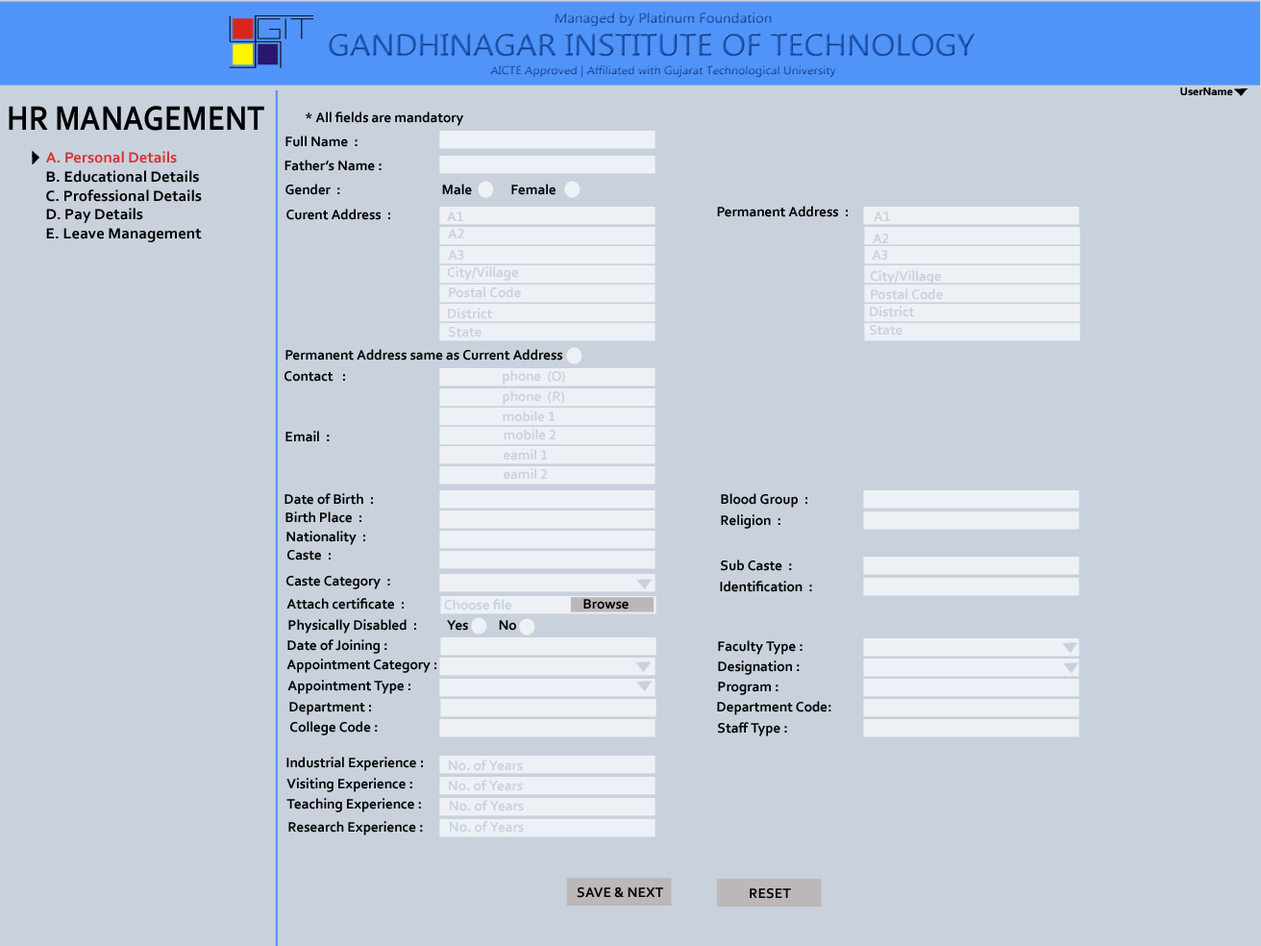
<style>
.page{position:relative;width:1261px;height:946px;background:#c9d1dd}
.page>*{position:absolute;margin:0}
.t1{font:11.5px "Corbel-Bold";color:#000000}
.t2{font:35.5px "Corbel-Bold";color:#000000;scale:0.87 1}
.t3{font:14.4px "Corbel-Bold";color:#000000}
.t4{font:15.7px "Corbel-Bold";color:#000000;scale:1.03 1}
.t5{font:15.7px "Corbel-Bold";color:#da3131;scale:1.03 1}
.t6{font:14.4px "Corbel-Bold";color:#c9d1dd}
</style>
<div class="page">
<p class="t1" style="left:1180px;top:87px;width:53px;height:8px">UserName</p>
<p class="t2" style="left:9px;top:106px;width:255px;height:25px">HR MANAGEMENT</p>
<p class="t3" style="left:306px;top:111px;width:157px;height:15px">* All fields are mandatory</p>
<p class="t3" style="left:285px;top:136px;width:73px;height:11px">Full Name  :</p>
<p class="t4" style="left:46px;top:151px;width:156px;height:91px"><span class="t5">A. Personal Details<br></span>B. Educational Details<br>C. Professional Details<br>D. Pay Details<br>E. Leave Management</p>
<p class="t3" style="left:284px;top:160px;width:98px;height:11px">Father’s Name :</p>
<p class="t3" style="left:285px;top:184px;width:270px;height:11px">Gender  :                                  Male             Female</p>
<p class="t3" style="left:286px;top:209px;width:104px;height:11px">Curent Address  :</p>
<p class="t3" style="left:717px;top:206px;width:131px;height:11px">Permanent Address  :</p>
<p class="t6" style="left:447px;top:211px;width:16px;height:10px">A1</p>
<p class="t6" style="left:874px;top:211px;width:16px;height:10px">A1</p>
<p class="t6" style="left:448px;top:229px;width:16px;height:9px">A2</p>
<p class="t6" style="left:873px;top:234px;width:16px;height:9px">A2</p>
<p class="t6" style="left:448px;top:250px;width:16px;height:10px">A3</p>
<p class="t6" style="left:872px;top:250px;width:16px;height:10px">A3</p>
<p class="t6" style="left:447px;top:266px;width:71px;height:15px">City/Village</p>
<p class="t6" style="left:870px;top:270px;width:71px;height:14px">City/Village</p>
<p class="t6" style="left:449px;top:286px;width:72px;height:12px">Postal Code</p>
<p class="t6" style="left:871px;top:288px;width:72px;height:12px">Postal Code</p>
<p class="t6" style="left:870px;top:306px;width:44px;height:11px">District</p>
<p class="t6" style="left:448px;top:308px;width:44px;height:11px">District</p>
<p class="t6" style="left:448px;top:327px;width:33px;height:10px">State</p>
<p class="t6" style="left:869px;top:325px;width:33px;height:10px">State</p>
<p class="t3" style="left:285px;top:349px;width:277px;height:11px">Permanent Address same as Current Address</p>
<p class="t3" style="left:284px;top:371px;width:61px;height:11px">Contact   :</p>
<p class="t6" style="left:503px;top:370px;width:62px;height:14px">phone  (O)</p>
<p class="t6" style="left:503px;top:390px;width:61px;height:15px">phone  (R)</p>
<p class="t6" style="left:503px;top:410px;width:52px;height:12px">mobile 1</p>
<p class="t3" style="left:285px;top:431px;width:45px;height:11px">Email  :</p>
<p class="t6" style="left:504px;top:429px;width:51px;height:11px">mobile 2</p>
<p class="t6" style="left:504px;top:449px;width:44px;height:11px">eamil 1</p>
<p class="t6" style="left:504px;top:468px;width:43px;height:12px">eamil 2</p>
<p class="t3" style="left:284px;top:493px;width:89px;height:12px">Date of Birth  :</p>
<p class="t3" style="left:721px;top:493px;width:86px;height:14px">Blood Group  :</p>
<p class="t3" style="left:285px;top:511px;width:76px;height:12px">Birth Place  :</p>
<p class="t3" style="left:721px;top:514px;width:59px;height:15px">Religion  :</p>
<p class="t3" style="left:286px;top:531px;width:79px;height:14px">Nationality  :</p>
<p class="t3" style="left:287px;top:550px;width:44px;height:10px">Caste  :</p>
<p class="t3" style="left:721px;top:559px;width:71px;height:12px">Sub Caste  :</p>
<p class="t3" style="left:286px;top:576px;width:104px;height:13px">Caste Category  :</p>
<p class="t3" style="left:720px;top:580px;width:92px;height:12px">Identification  :</p>
<p class="t3" style="left:286px;top:598px;width:118px;height:11px">Attach certificate  :</p>
<p class="t6" style="left:444px;top:599px;width:67px;height:11px">Choose file</p>
<p class="t3" style="left:583px;top:599px;width:46px;height:10px">Browse</p>
<p class="t3" style="left:288px;top:619px;width:228px;height:14px">Physically Disabled  :          Yes          No</p>
<p class="t3" style="left:287px;top:639px;width:100px;height:15px">Date of Joining :</p>
<p class="t3" style="left:718px;top:640px;width:84px;height:14px">Faculty Type :</p>
<p class="t3" style="left:286px;top:658px;width:150px;height:15px">Appointment Category :</p>
<p class="t3" style="left:718px;top:660px;width:82px;height:15px">Designation :</p>
<p class="t3" style="left:287px;top:679px;width:123px;height:15px">Appointment Type :</p>
<p class="t3" style="left:718px;top:681px;width:60px;height:14px">Program :</p>
<p class="t3" style="left:289px;top:702px;width:82px;height:13px">Department :</p>
<p class="t3" style="left:717px;top:701px;width:114px;height:14px">Department Code:</p>
<p class="t3" style="left:290px;top:721px;width:88px;height:14px">College Code :</p>
<p class="t3" style="left:718px;top:722px;width:69px;height:14px">Staff Type :</p>
<p class="t3" style="left:286px;top:756px;width:137px;height:15px">Industrial Experience :</p>
<p class="t6" style="left:449px;top:759px;width:74px;height:12px">No. of Years</p>
<p class="t3" style="left:286px;top:778px;width:126px;height:14px">Visiting Experience :</p>
<p class="t6" style="left:449px;top:779px;width:74px;height:12px">No. of Years</p>
<p class="t3" style="left:286px;top:798px;width:135px;height:14px">Teaching Experience :</p>
<p class="t6" style="left:450px;top:800px;width:74px;height:11px">No. of Years</p>
<p class="t3" style="left:288px;top:821px;width:135px;height:14px">Research Experience :</p>
<p class="t6" style="left:450px;top:821px;width:74px;height:11px">No. of Years</p>
<p class="t3" style="left:577px;top:887px;width:86px;height:11px">SAVE &amp; NEXT</p>
<p class="t3" style="left:750px;top:888px;width:41px;height:11px">RESET</p>
</div>
